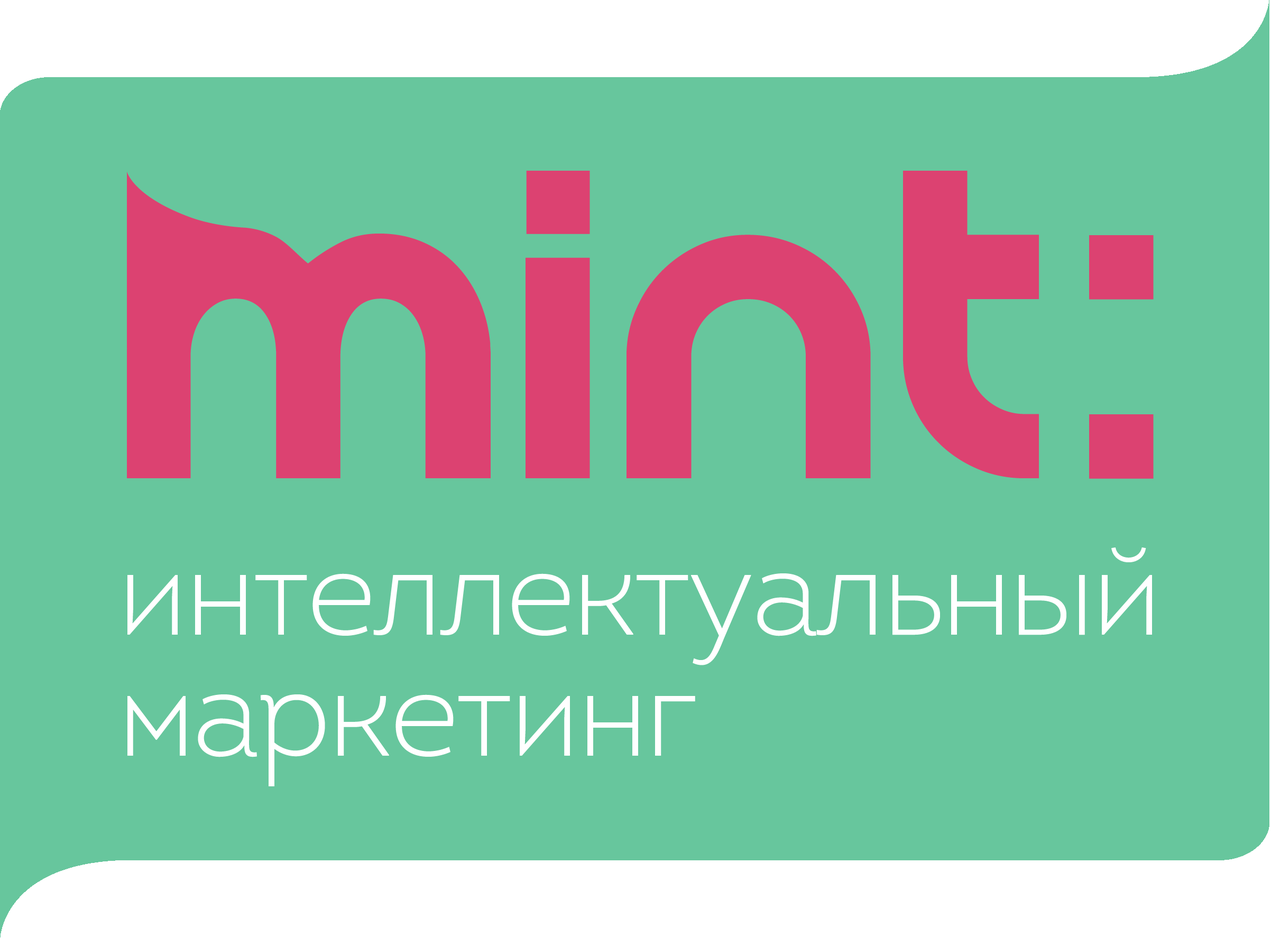
<style>
.page{position:relative;width:1271px;height:938px;background:#67c69d}
.page>*{position:absolute;margin:0}
.t1{font:124.1px/121.1px "Intro-Light";letter-spacing:-0.025em;color:#ffffff}
</style>
<div class="page">
<p class="t1" style="left:127px;top:548px;width:1025px;height:239px">интеллектуальный<br>маркетинг</p>
</div>
